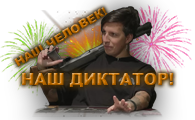
<style>
.page{position:relative;width:195px;height:120px}
.page>*{position:absolute;margin:0}
.t1{font:12px "Arial-Black"}
.t2{font:16px "Arial-Black"}
</style>
<div class="page">
<p class="t1" style="left:14px;top:7px;width:94px;height:60px;rotate:-31deg">НАШ ЧЕЛОВЕК!</p>
<p class="t2" style="left:22px;top:73px;width:152px;height:14px">НАШ ДИКТАТОР!</p>
</div>
